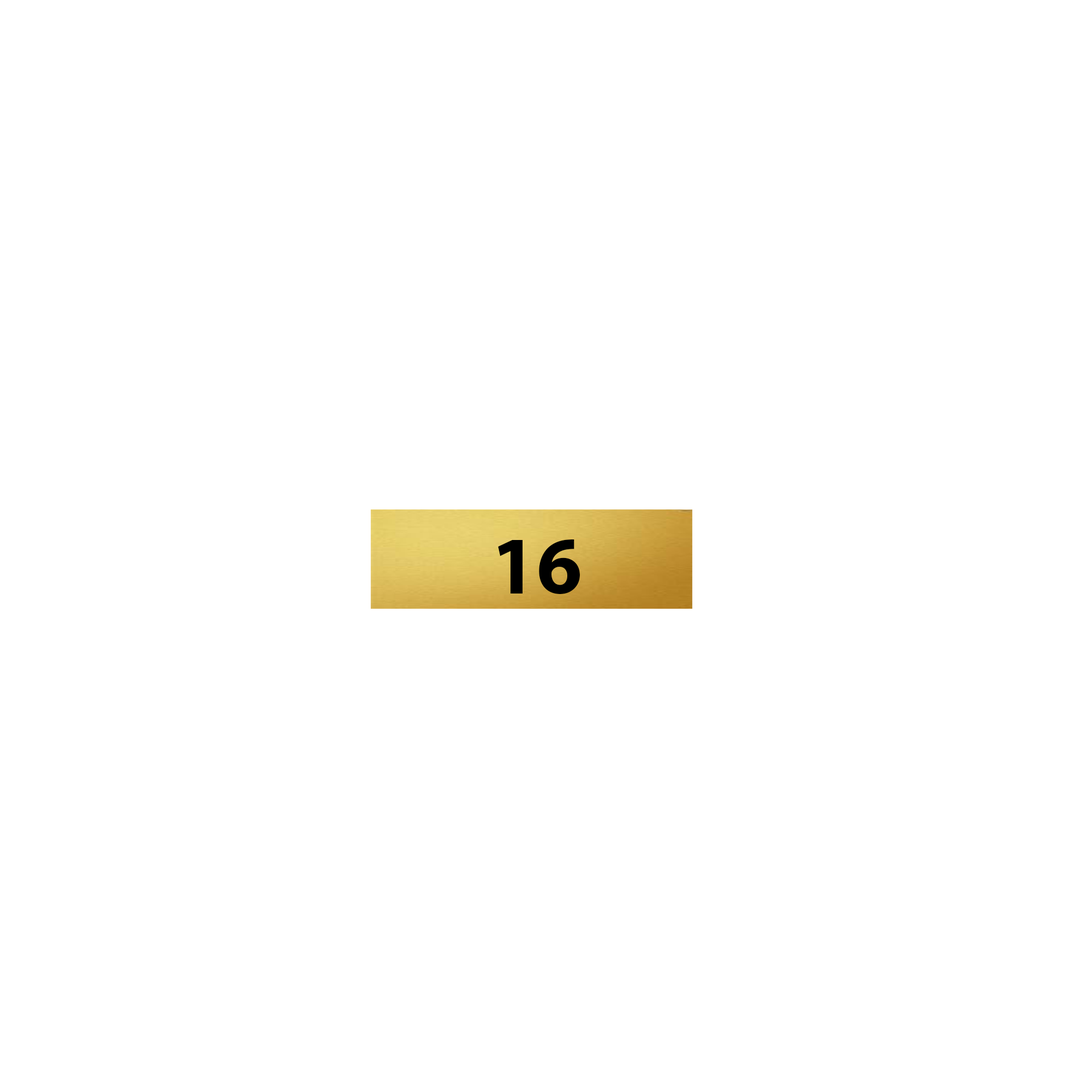
<style>
.page{position:relative;width:1092px;height:1092px;background:#ffffff}
.page>*{position:absolute;margin:0}
.t1{font:81.9px "MyriadPro-Bold";color:#000000}
</style>
<div class="page">
<p class="t1" style="left:498px;top:539px;width:82px;height:55px">16</p>
</div>
